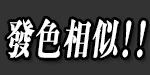
<style>
.page{position:relative;width:150px;height:75px;background:#333333}
.page>*{position:absolute;margin:0}
.t1{font:41.9px "HYa9gf";color:#ffffff;font-style:italic;scale:0.68 1}
</style>
<div class="page">
<p class="t1" style="left:7px;top:18px;width:139px;height:40px">发色相似!!</p>
</div>
